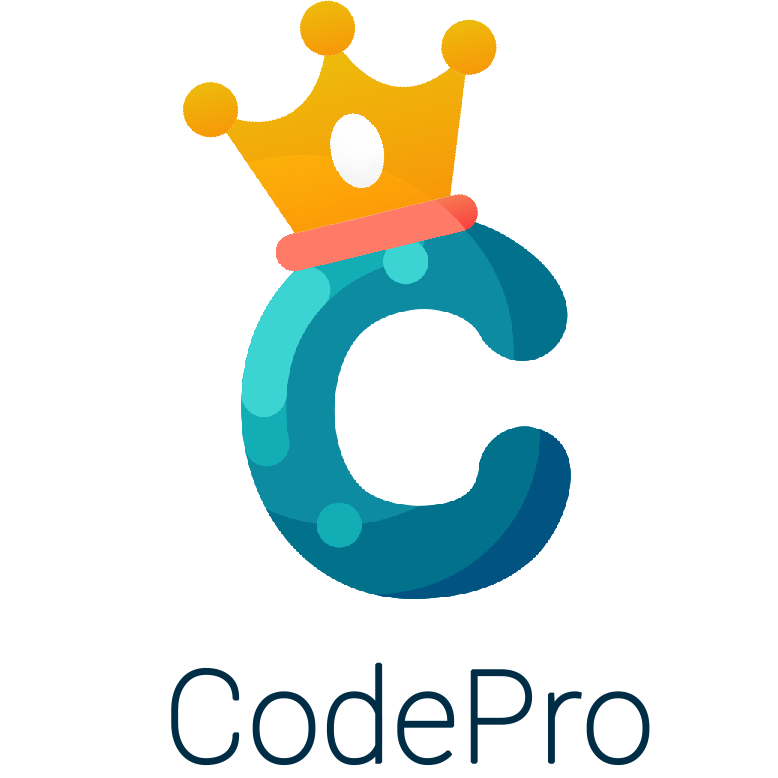
<style>
.page{position:relative;width:778px;height:778px;background:#ffffff}
.page>*{position:absolute;margin:0}
.t1{font:128px "Roboto-Thin";letter-spacing:-0.01em;color:#002d46;font-weight:bold}
</style>
<div class="page">
<p class="t1" style="left:171px;top:662px;width:479px;height:104px">CodePro</p>
</div>
